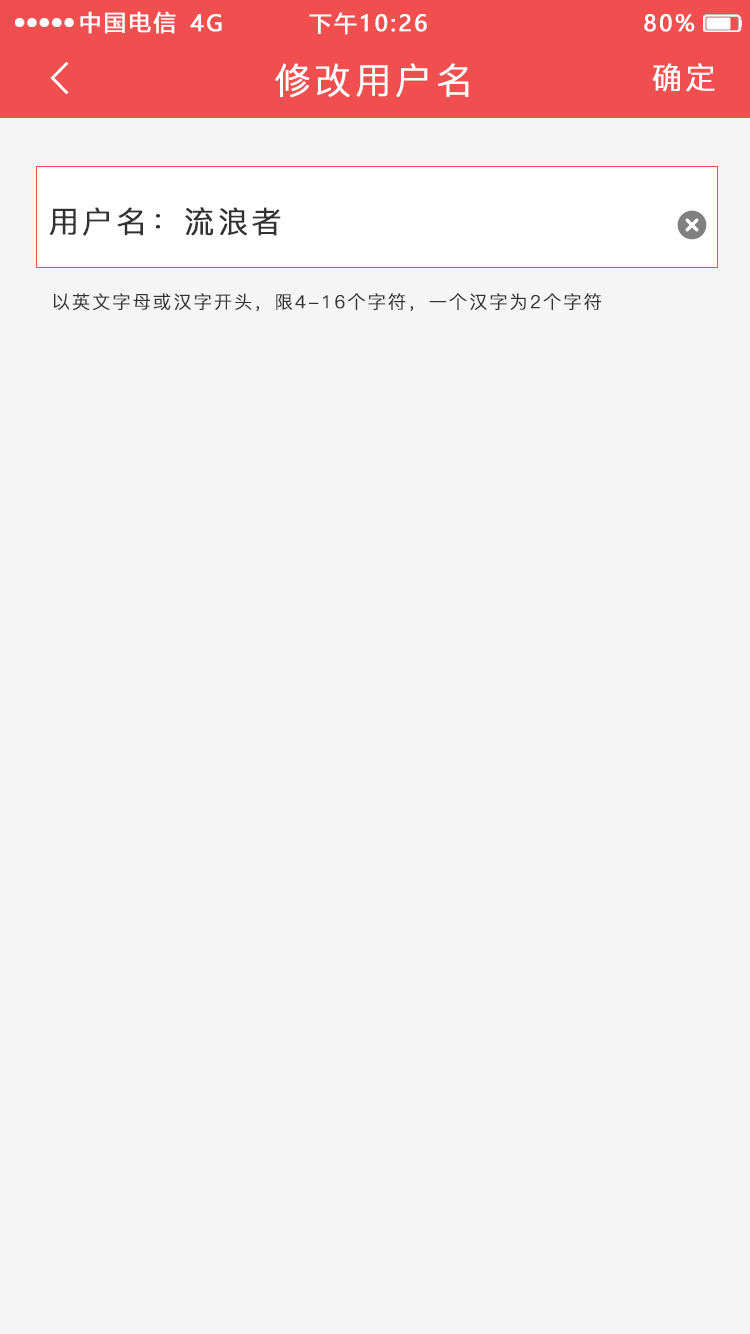
<style>
.page{position:relative;width:750px;height:1334px;background:#f5f5f5}
.page>*{position:absolute;margin:0}
.t1{font:22px "MicrosoftYaHei";letter-spacing:0.1em;color:#ffffff;text-transform:uppercase;font-weight:bold}
.t2{font:36px "PingFang-SC-Regular";letter-spacing:0.1em;color:#ffffff;text-transform:uppercase;font-weight:bold}
.t3{font:30px "PingFang-SC-Regular";letter-spacing:0.1em;color:#ffffff;text-transform:uppercase;font-weight:bold}
.t4{font:30px "PingFang-SC-Regular";letter-spacing:0.1em;color:#323233;text-transform:uppercase;font-weight:bold}
.t5{font:18px "PingFang-SC-Regular";letter-spacing:0.1em;color:#323233;text-transform:uppercase;font-weight:bold}
</style>
<div class="page">
<p class="t1" style="left:80px;top:11px;width:96px;height:23px">中国电信</p>
<p class="t1" style="left:190px;top:14px;width:32px;height:18px">4G</p>
<p class="t1" style="left:309px;top:12px;width:118px;height:23px">下午10:26</p>
<p class="t1" style="left:644px;top:14px;width:51px;height:18px">80%</p>
<p class="t2" style="left:275px;top:63px;width:194px;height:35px">修改用户名</p>
<p class="t3" style="left:652px;top:63px;width:63px;height:29px">确定</p>
<p class="t4" style="left:50px;top:207px;width:231px;height:29px">用户名：流浪者</p>
<p class="t5" style="left:53px;top:293px;width:548px;height:18px">以英文字母或汉字开头，限4-16个字符，一个汉字为2个字符</p>
</div>
